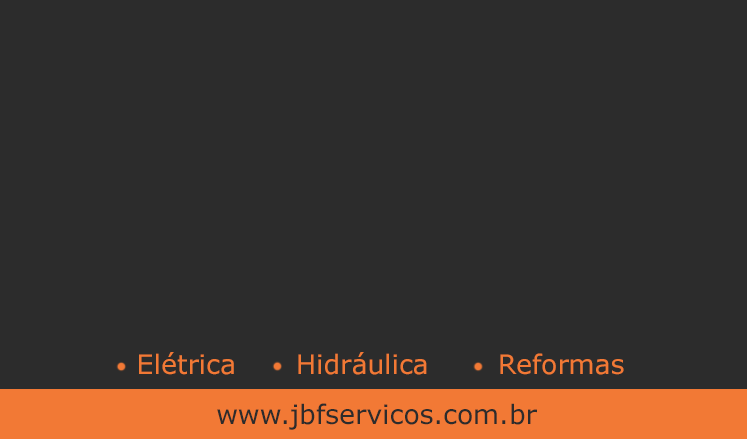
<style>
.page{position:relative;width:747px;height:439px;background:#2c2c2c}
.page>*{position:absolute;margin:0}
.t1{font:26.7px "Verdana";color:#f27935}
.t2{font:26.7px "Verdana";color:#2c2c2c}
</style>
<div class="page">
<p class="t1" style="left:139px;top:352px;width:95px;height:23px">Elétrica</p>
<p class="t1" style="left:298px;top:352px;width:129px;height:23px">Hidráulica</p>
<p class="t1" style="left:500px;top:353px;width:124px;height:22px">Reformas</p>
<p class="t2" style="left:217px;top:403px;width:320px;height:27px">www.jbfservicos.com.br</p>
</div>
